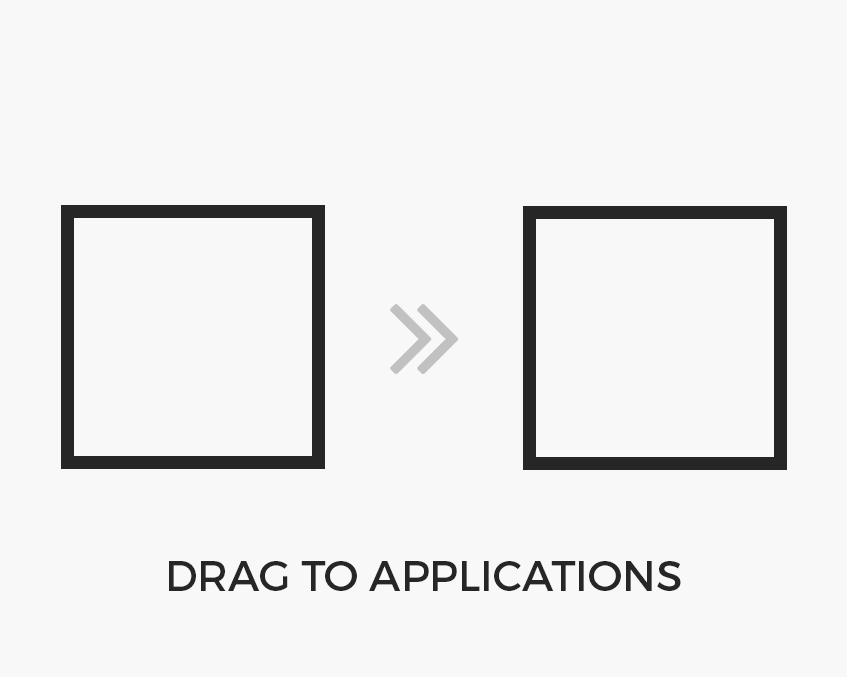
<style>
.page{position:relative;width:847px;height:677px;background:#f8f8f8}
.page>*{position:absolute;margin:0}
.t1{font:42.3px "Montserrat-Regular";color:#262626}
</style>
<div class="page">
<p class="t1" style="left:169px;top:561px;width:512px;height:30px">DRAG TO APPLICATIONS</p>
</div>
